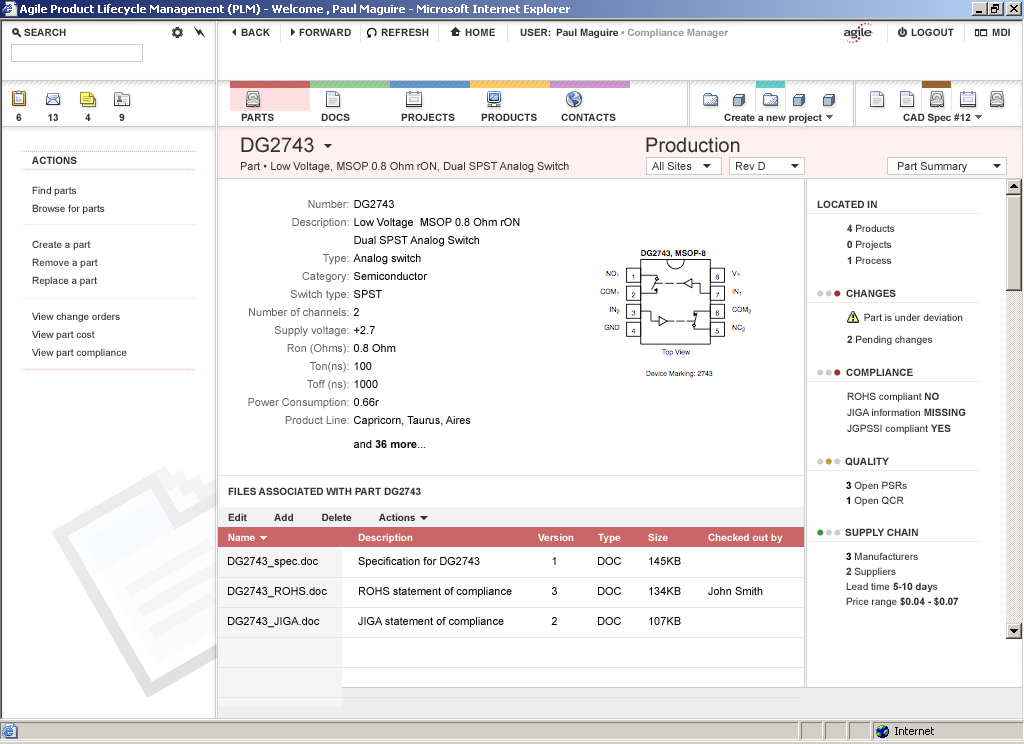
<style>
.page{position:relative;width:1024px;height:744px;background:#ffffff}
.page>*{position:absolute;margin:0}
.t1{font:20px "ArialMT";color:#333333}
.t2{font:10px "Arial-BoldMT";color:#333333}
.t3{font:11px "ArialMT";color:#333333}
.t4{font:10px/18px "ArialMT";color:#333333}
.t5{font:11px/18px "ArialMT";color:#666666}
.t6{font:11px/18px "ArialMT";color:#000000}
.t7{font:11px/18px "Arial-BoldMT";color:#000000}
.t8{font:10px/16px "ArialMT";color:#333333}
.t9{font:10px/16px "Arial-BoldMT";color:#333333}
.t10{font:24px "ArialMT";color:#cccccc}
.t11{font:24px "ArialMT";color:#993333}
.t12{font:24px "ArialMT";color:#cc9933}
.t13{font:10px/15px "ArialMT";color:#333333}
.t14{font:10px/15px "Arial-BoldMT";color:#000000}
.t15{font:10px "Arial-BoldMT";color:#ffffff}
.t16{font:24px "ArialMT";color:#339933}
.t17{font:11px/30px "ArialMT";color:#000000}
.t18{font:10px/15px "Arial-BoldMT";color:#333333}
.t19{font:11px "ArialMT";color:#000000}
</style>
<div class="page">
<p class="t1" style="left:241px;top:137px;width:73px;height:16px">DG2743</p>
<p class="t1" style="left:646px;top:137px;width:94px;height:16px">Production</p>
<p class="t2" style="left:32px;top:156px;width:45px;height:8px">ACTIONS</p>
<p class="t3" style="left:241px;top:162px;width:328px;height:11px">Part • Low Voltage, MSOP 0.8 Ohm rON, Dual SPST Analog Switch</p>
<p class="t3" style="left:652px;top:162px;width:40px;height:8px">All Sites</p>
<p class="t3" style="left:736px;top:162px;width:29px;height:8px">Rev D</p>
<p class="t3" style="left:898px;top:162px;width:69px;height:11px">Part Summary</p>
<p class="t4" style="left:32px;top:186px;width:95px;height:172px">Find parts<br>Browse for parts<br><br>Create a part<br>Remove a part<br>Replace a part<br><br>View change orders<br>View part cost<br>View part compliance</p>
<p class="t5" style="left:248px;top:200px;width:101px;height:224px;text-align:right">Number:<br>Description:<br><br>Type:<br>Category:<br>Switch type:<br>Number of channels:<br>Supply voltage:<br>Ron (Ohms):<br>Ton(ns):<br>Toff (ns):<br>Power Consumption:<br>Product Line:</p>
<p class="t6" style="left:353px;top:200px;width:167px;height:248px">DG2743<br>Low Voltage  MSOP 0.8 Ohm rON<br>Dual SPST Analog Switch<br>Analog switch<br>Semiconductor<br>SPST<br>2<br>+2.7<br>0.8 Ohm<br>100<br>1000<br>0.66r<br>Capricorn, Taurus, Aires<br>and <span class="t7">36 more</span>...</p>
<p class="t2" style="left:817px;top:200px;width:60px;height:8px">LOCATED IN</p>
<p class="t8" style="left:847px;top:224px;width:48px;height:40px"><span class="t9">4</span> Products<br><span class="t9">0</span> Projects<br><span class="t9">1</span> Process</p>
<p class="t10" style="left:817px;top:290px;width:24px;height:7px">••<span class="t11">•</span></p>
<p class="t2" style="left:846px;top:289px;width:50px;height:8px">CHANGES</p>
<p class="t8" style="left:847px;top:313px;width:116px;height:32px">Part is under deviation<br><span class="t9">2 </span>Pending changes</p>
<p class="t10" style="left:817px;top:369px;width:24px;height:7px">••<span class="t11">•</span></p>
<p class="t2" style="left:846px;top:368px;width:67px;height:8px">COMPLIANCE</p>
<p class="t8" style="left:847px;top:392px;width:119px;height:42px">ROHS compliant <span class="t9">NO<br></span>JIGA information <span class="t9">MISSING<br></span>JGPSSI compliant <span class="t9">YES</span></p>
<p class="t10" style="left:817px;top:458px;width:24px;height:7px">•<span class="t12">•</span>•</p>
<p class="t2" style="left:845px;top:457px;width:44px;height:9px">QUALITY</p>
<p class="t13" style="left:846px;top:481px;width:61px;height:25px"><span class="t14">3 </span>Open PSRs<br><span class="t14">1 </span>Open QCR</p>
<p class="t2" style="left:228px;top:487px;width:193px;height:8px">FILES ASSOCIATED WITH PART DG2743</p>
<p class="t2" style="left:228px;top:513px;width:187px;height:8px">Edit          Add          Delete          Actions</p>
<p class="t15" style="left:228px;top:533px;width:27px;height:8px">Name</p>
<p class="t15" style="left:358px;top:533px;width:55px;height:10px">Description</p>
<p class="t15" style="left:538px;top:533px;width:36px;height:8px">Version</p>
<p class="t15" style="left:598px;top:533px;width:23px;height:10px">Type</p>
<p class="t15" style="left:648px;top:533px;width:20px;height:8px">Size</p>
<p class="t15" style="left:708px;top:533px;width:75px;height:10px">Checked out by</p>
<p class="t10" style="left:817px;top:529px;width:24px;height:7px"><span class="t16">•</span>••</p>
<p class="t2" style="left:845px;top:528px;width:73px;height:8px">SUPPLY CHAIN</p>
<p class="t17" style="left:228px;top:557px;width:99px;height:71px">DG2743_spec.doc<br>DG2743_ROHS.doc<br>DG2743_JIGA.doc</p>
<p class="t17" style="left:358px;top:557px;width:154px;height:71px">Specification for DG2743<br>ROHS statement of compliance<br>JIGA statement of compliance</p>
<p class="t17" style="left:551px;top:557px;width:6px;height:68px">1<br>3<br>2</p>
<p class="t17" style="left:598px;top:557px;width:23px;height:68px">DOC<br>DOC<br>DOC</p>
<p class="t17" style="left:649px;top:557px;width:32px;height:68px">145KB<br>134KB<br>107KB</p>
<p class="t13" style="left:846px;top:552px;width:113px;height:55px"><span class="t14">3</span> Manufacturers<br><span class="t18">2</span> Suppliers<br>Lead time <span class="t18">5-10 day</span>s<br>Price range <span class="t18">$0.04 - $0.07</span></p>
<p class="t19" style="left:708px;top:587px;width:55px;height:8px">John Smith</p>
</div>
